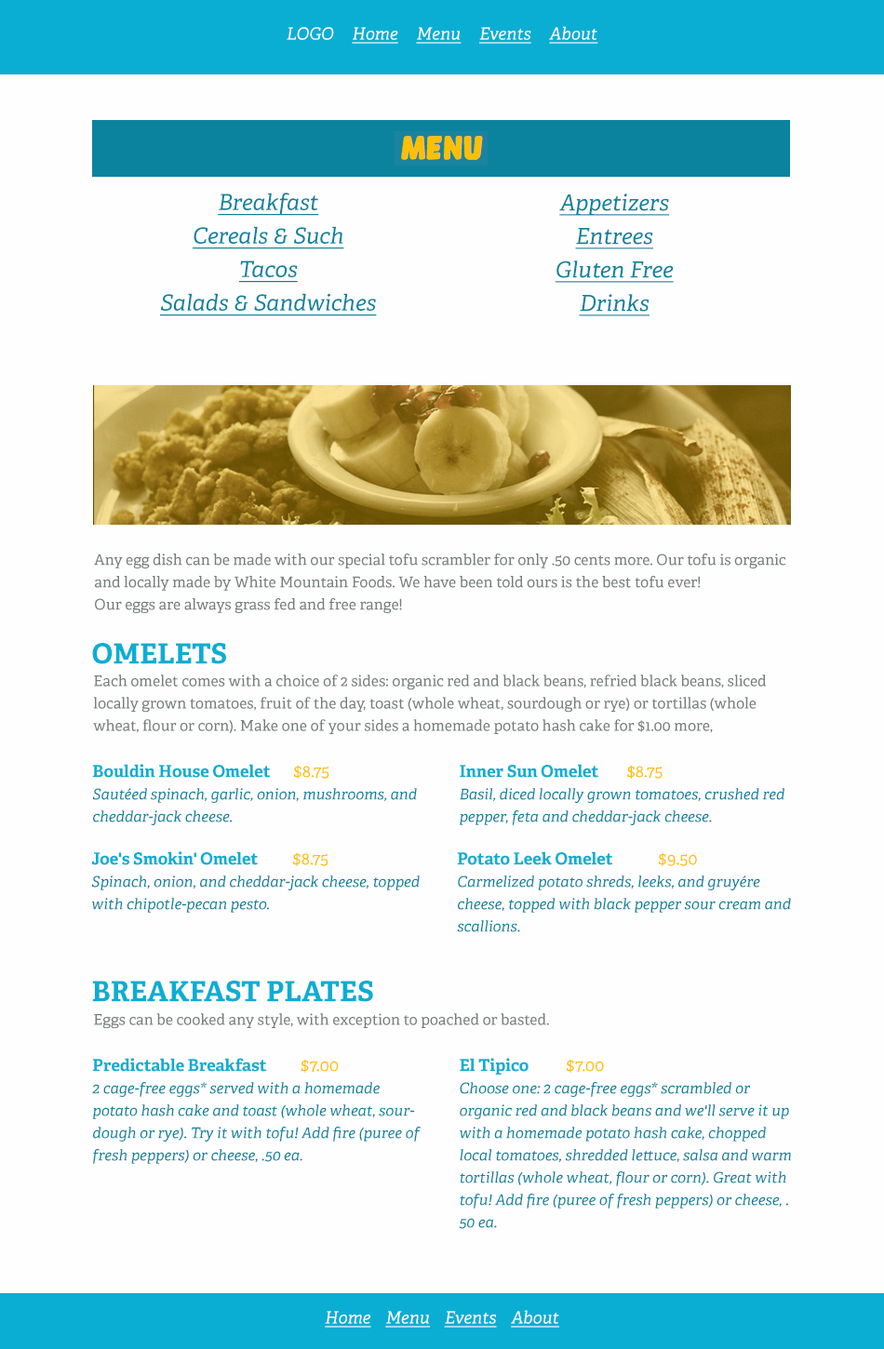
<style>
.page{position:relative;width:884px;height:1349px;background:#fefefe}
.page>*{position:absolute;margin:0}
.t1{font:16.7px "Adelle-Italic";color:#ffffff;text-decoration:underline}
.t2{font:16.7px "Adelle-Italic";color:#ffffff}
.t3{font:22.3px/33.5px "Adelle-Italic";color:#0c839e;text-decoration:underline}
.t4{font:14.9px/22.3px "Adelle-Regular";color:#767b7c}
.t5{font:27.9px "Adelle-Bold";color:#0aaed3}
.t6{font:14.9px/22.3px "Adelle-Italic";color:#0c839e}
.t7{font:16.7px/22.3px "Adelle-Bold";color:#0aaed3}
.t8{font:16.7px/22.3px "Adelle-Regular";color:#ffc000}
.t9{font:16.7px/22.3px "Adelle-Regular";color:#fcc000}
.t10{font:14.9px "Adelle-Regular";color:#767b7c}
</style>
<div class="page">
<p class="t1" style="left:287px;top:26px;width:311px;height:18px"><span class="t2">LOGO     </span>Home     Menu     Events     About</p>
<p class="t3" style="left:160px;top:193px;width:217px;height:123px;text-align:center">Breakfast<br>Cereals &amp; Such<br>Tacos<br>Salads &amp; Sandwiches</p>
<p class="t3" style="left:555px;top:194px;width:119px;height:122px;text-align:center">Appetizers<br>Entrees<br>Gluten Free<br>Drinks</p>
<p class="t4" style="left:94px;top:554px;width:691px;height:59px">Any egg dish can be made with our special tofu scrambler for only .50 cents more. Our tofu is organic and locally made by White Mountain Foods. We have been told ours is the best tofu ever!<br>Our eggs are always grass fed and free range!</p>
<p class="t5" style="left:92px;top:643px;width:134px;height:21px">OMELETS</p>
<p class="t4" style="left:93px;top:675px;width:673px;height:59px">Each omelet comes with a choice of 2 sides: organic red and black beans, refried black beans, sliced locally grown tomatoes, fruit of the day, toast (whole wheat, sourdough or rye) or tortillas (whole wheat, flour or corn). Make one of your sides a homemade potato hash cake for $1.00 more,</p>
<p class="t6" style="left:92px;top:764px;width:325px;height:61px"><span class="t7">Bouldin House Omelet </span><span class="t8">$8.75<br></span>Sautéed spinach, garlic, onion, mushrooms, and cheddar-jack cheese.</p>
<p class="t6" style="left:460px;top:764px;width:324px;height:61px"><span class="t7">Inner Sun Omelet </span><span class="t8">$8.75<br></span>Basil, diced locally grown tomatoes, crushed red pepper, feta and cheddar-jack cheese.</p>
<p class="t6" style="left:91px;top:851px;width:329px;height:62px"><span class="t7">Joe's Smokin' Omelet  </span><span class="t9">$8.75<br></span>Spinach, onion, and cheddar-jack cheese, topped with chipotle-pecan pesto.</p>
<p class="t6" style="left:457px;top:851px;width:334px;height:81px"><span class="t7">Potato Leek Omelet  </span><span class="t8">$9.50<br></span>Carmelized potato shreds, leeks, and gruyére cheese, topped with black pepper sour cream and scallions.</p>
<p class="t5" style="left:92px;top:981px;width:281px;height:21px">BREAKFAST PLATES</p>
<p class="t10" style="left:94px;top:1013px;width:455px;height:16px">Eggs can be cooked any style, with exception to poached or basted.</p>
<p class="t6" style="left:92px;top:1058px;width:329px;height:106px"><span class="t7">Predictable Breakfast          </span><span class="t8">$7.00<br></span>2 cage-free eggs* served with a homemade potato hash cake and toast (whole wheat, sourdough or rye). Try it with tofu! Add fire (puree of fresh peppers) or cheese, .50 ea.</p>
<p class="t6" style="left:459px;top:1058px;width:333px;height:171px"><span class="t7">El Tipico           </span><span class="t8">$7.00<br></span>Choose one: 2 cage-free eggs* scrambled or organic red and black beans and we'll serve it up with a homemade potato hash cake, chopped local tomatoes, shredded lettuce, salsa and warm tortillas (whole wheat, flour or corn). Great with tofu! Add fire (puree of fresh peppers) or cheese, . 50 ea.</p>
<p class="t1" style="left:325px;top:1310px;width:234px;height:18px">Home    Menu    Events    About</p>
</div>
